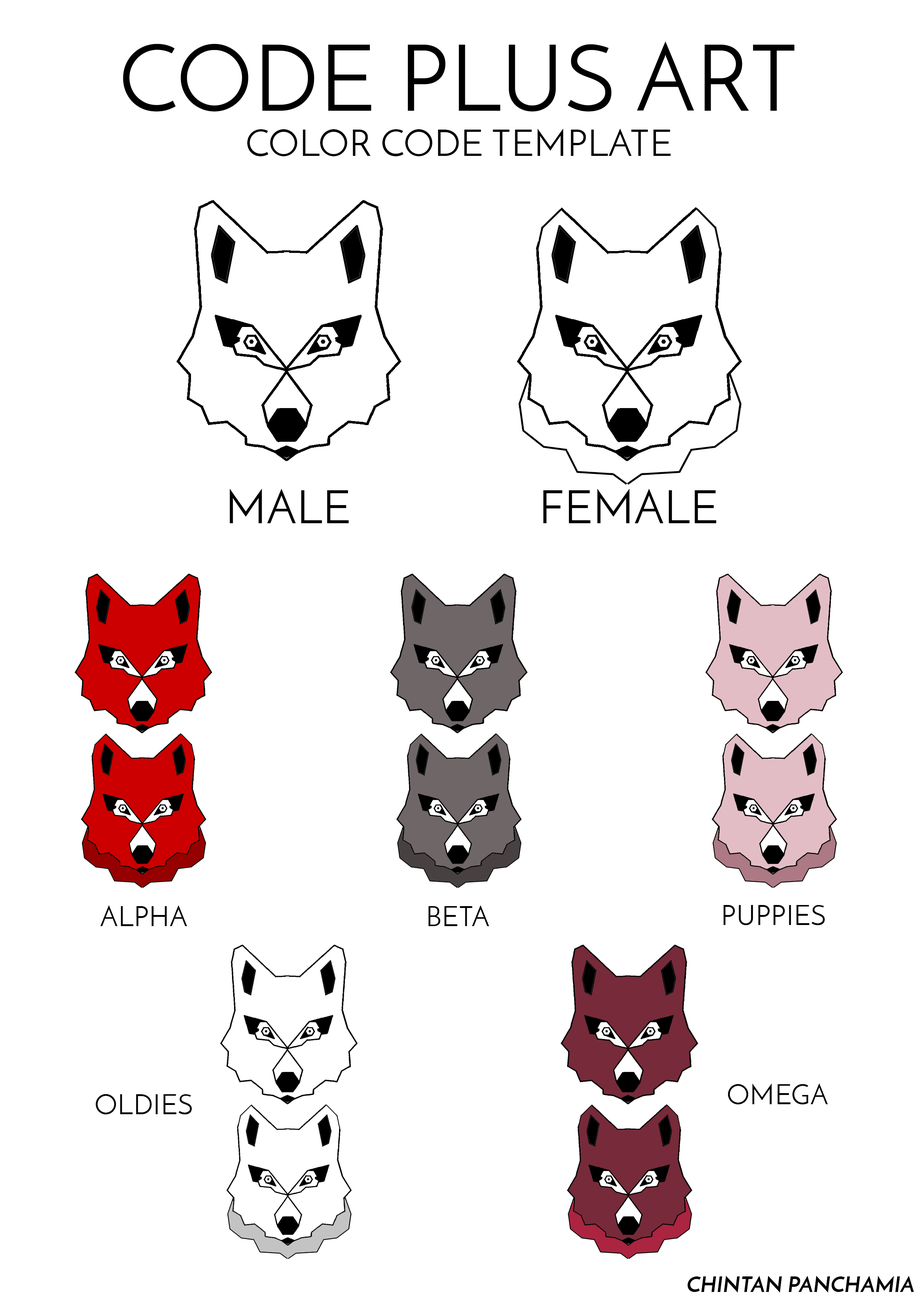
<style>
.page{position:relative;width:918px;height:1299px;background:#ffffff}
.page>*{position:absolute;margin:0}
.t1{font:92.6px "JosefinSans";color:#000000}
.t2{font:37px "JosefinSans";color:#000000}
.t3{font:46.3px "JosefinSans";color:#000000}
.t4{font:27.8px "JosefinSans";color:#000000}
.t5{font:21.6px "JosefinSans-BoldItalic";color:#000000}
</style>
<div class="page">
<p class="t1" style="left:123px;top:41px;width:671px;height:70px">CODE PLUS ART</p>
<p class="t2" style="left:247px;top:128px;width:424px;height:28px">COLOR CODE TEMPLATE</p>
<p class="t3" style="left:230px;top:488px;width:119px;height:35px">MALE</p>
<p class="t3" style="left:543px;top:488px;width:173px;height:35px">FEMALE</p>
<p class="t4" style="left:100px;top:905px;width:87px;height:21px">ALPHA</p>
<p class="t4" style="left:428px;top:905px;width:61px;height:21px">BETA</p>
<p class="t4" style="left:723px;top:905px;width:102px;height:20px">PUPPIES</p>
<p class="t4" style="left:728px;top:1083px;width:100px;height:21px">OMEGA</p>
<p class="t4" style="left:96px;top:1094px;width:96px;height:20px">OLDIES</p>
<p class="t5" style="left:688px;top:1275px;width:226px;height:17px">CHINTAN PANCHAMIA</p>
</div>
